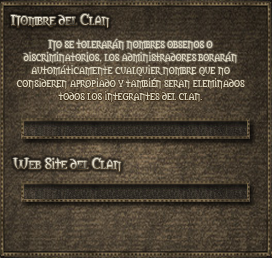
<style>
.page{position:relative;width:272px;height:258px}
.page>*{position:absolute;margin:0}
.t1{font:14px "Morpheus"}
.t2{font:11px "Morpheus";color:#d8d2bd}
</style>
<div class="page">
<p class="t1" style="left:11px;top:14px;width:98px;height:14px">Nombre del Clan</p>
<p class="t2" style="left:16px;top:39px;width:229px;height:63px;text-align:center">No se tolerarán nombres obsenos o discriminatorios, los administradores borarán automáticamente cualquier nombre que no consideren apropiado y también seran eleminados todos los integrantes del clan.</p>
<p class="t1" style="left:13px;top:158px;width:108px;height:14px">Web Site del Clan</p>
</div>
